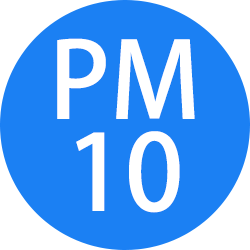
<style>
.page{position:relative;width:250px;height:250px;background:#1b80f3}
.page>*{position:absolute;margin:0}
.t1{font:104.2px/91.7px "AdobeHeitiStd-Regular";color:#ffffff}
</style>
<div class="page">
<p class="t1" style="left:57px;top:38px;width:138px;height:175px;text-align:center">PM<br>10</p>
</div>
